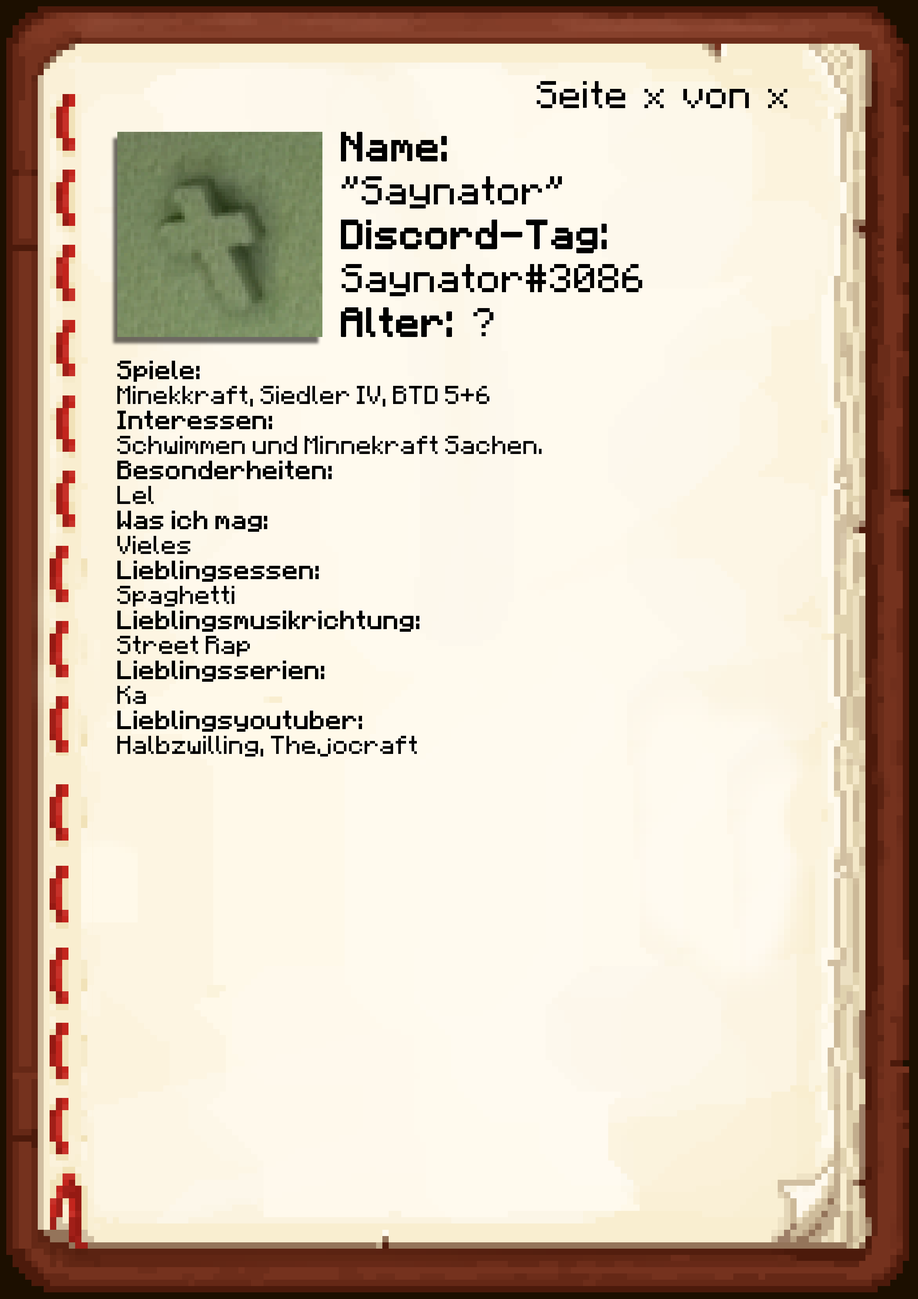
<style>
.page{position:relative;width:918px;height:1299px}
.page>*{position:absolute;margin:0}
.t1{font:38.6px "Minecraft-Regular";color:#000000}
.t2{font:40.1px/43.9px "Minecraft-Regular";color:#000000}
.t3{font:40.1px/43.9px "Minecraft-Regular";color:#000000;font-weight:bold}
.t4{font:20.8px "Minecraft";color:#000000}
.t5{font:20.8px "Minecraft";color:#000000;font-weight:bold}
</style>
<div class="page">
<p class="t1" style="left:537px;top:81px;width:250px;height:27px">Seite x von x</p>
<p class="t2" style="left:341px;top:132px;width:301px;height:205px"><span class="t3">Name:<br></span>"Saynator"<br><span class="t3">Discord-Tag:<br></span>Saynator#3086<br><span class="t3">Alter: </span>?</p>
<p class="t4" style="left:117px;top:361px;width:425px;height:395px"><span class="t5">Spiele: <br></span>Minekkraft, Siedler IV, BTD 5+6<br><span class="t5">Interessen:<br></span>Schwimmen und Minnekraft Sachen.<br><span class="t5">Besonderheiten:<br></span>Lel<br><span class="t5">Was ich mag:<br></span>Vieles<br><span class="t5">Lieblingsessen:<br></span>Spaghetti<br><span class="t5">Lieblingsmusikrichtung:<br></span>Street Rap<br><span class="t5">Lieblingsserien:<br></span>Ka<br><span class="t5">Lieblingsyoutuber:<br></span>Halbzwilling, Thejocraft</p>
</div>
